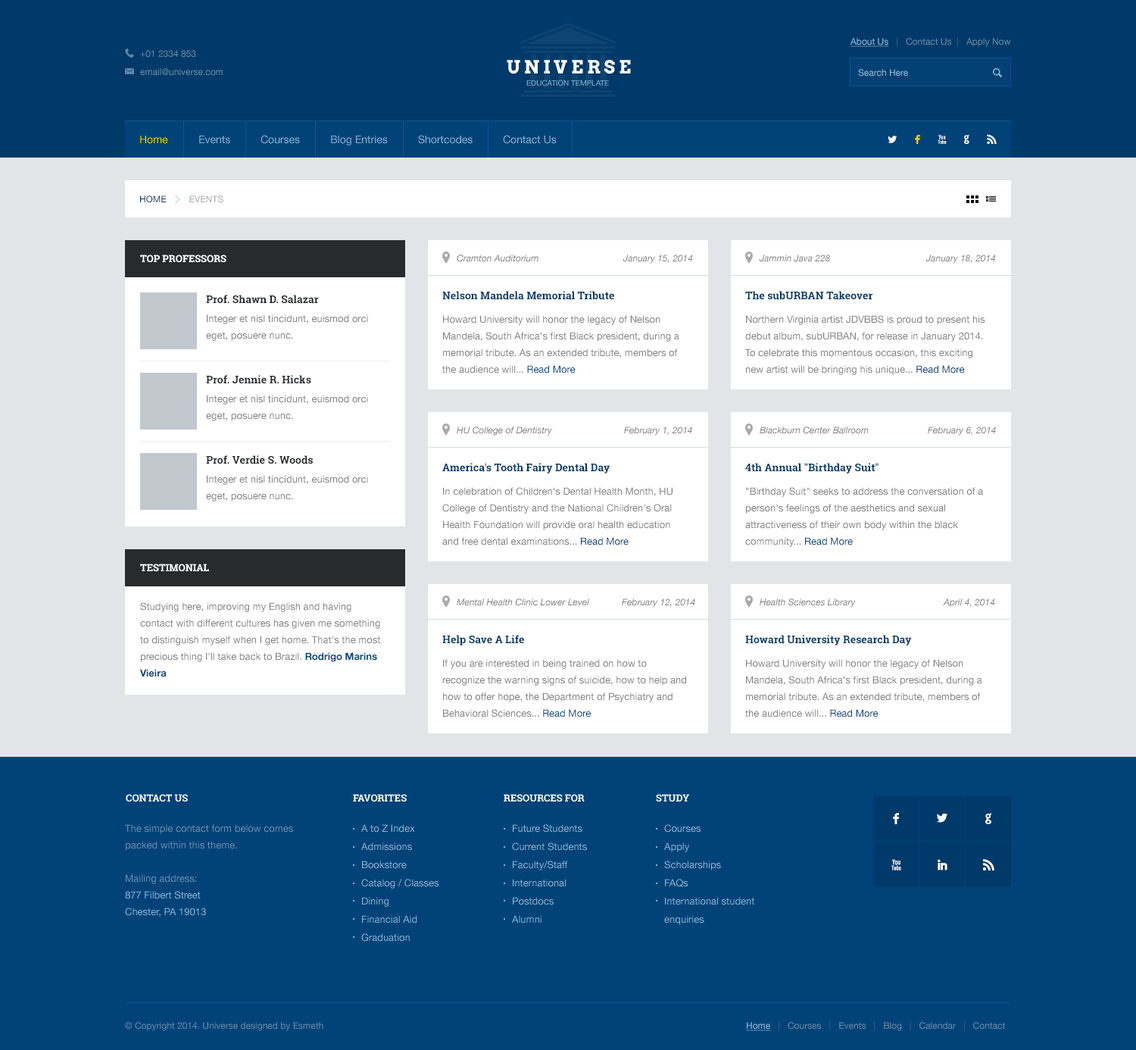
<style>
.page{position:relative;width:1136px;height:1050px;background:#014379}
.page>*{position:absolute;margin:0}
.t1{font:9.1px "HelveticaNeue";color:#6289a7}
.t2{font:9.1px "HelveticaNeue";color:#8ab5d6;text-decoration:underline}
.t3{font:9.1px "HelveticaNeue";color:#44647c}
.t4{font:18.2px "Arvo-Bold";letter-spacing:0.2em;color:#ffffff}
.t5{font:9.1px "HelveticaNeue";color:#8ab5d6}
.t6{font:7.6px "HelveticaNeue";color:#8ab5d6}
.t7{font:10.6px "HelveticaNeue";color:#fecd0b}
.t8{font:10.6px "HelveticaNeue";color:#8ab5d6}
.t9{font:15.1px "Socialico";letter-spacing:1.1em;color:#ffffff}
.t10{font:15.1px "Socialico";letter-spacing:1.1em;color:#fecd0b}
.t11{font:9.1px "HelveticaNeue";color:#aaaaaa}
.t12{font:9.1px "HelveticaNeue";color:#003a6a}
.t13{font:9.8px "RobotoSlab-Bold";color:#ffffff;text-transform:uppercase}
.t14{font:9.1px "HelveticaNeue-Italic";color:#808080}
.t15{font:10.6px "RobotoSlab-Bold";color:#003a6a}
.t16{font:10.6px "RobotoSlab-Bold";color:#282a2c}
.t17{font:9.8px/16.7px "HelveticaNeue";color:#808080}
.t18{font:9.8px/16.7px "HelveticaNeue";color:#014379}
.t19{font:9.8px/16.7px "HelveticaNeue-Bold";color:#014379}
.t20{font:18.2px "Socialico";color:#ffffff;text-transform:uppercase}
.t21{font:9.8px/16.7px "HelveticaNeue";color:#6b90ad}
.t22{font:9.8px/16.7px "HelveticaNeue";color:#8ab5d6}
.t23{font:9.8px/18.2px "HelveticaNeue";color:#8ab5d6}
</style>
<div class="page">
<p class="t1" style="left:850px;top:37px;width:161px;height:10px"><span class="t2">About Us  </span><span class="t3"> |   </span>Contact Us <span class="t3"> | </span>  Apply Now</p>
<p class="t1" style="left:140px;top:50px;width:56px;height:8px">+01 2334 853</p>
<p class="t4" style="left:507px;top:60px;width:124px;height:14px">UNIVERSE</p>
<p class="t1" style="left:140px;top:68px;width:83px;height:8px">email@universe.com</p>
<p class="t5" style="left:858px;top:69px;width:50px;height:7px">Search Here</p>
<p class="t6" style="left:526px;top:80px;width:83px;height:6px">EDUCATION TEMPLATE</p>
<p class="t7" style="left:140px;top:136px;width:28px;height:8px">Home</p>
<p class="t8" style="left:199px;top:136px;width:31px;height:8px">Events</p>
<p class="t8" style="left:261px;top:135px;width:39px;height:9px">Courses</p>
<p class="t8" style="left:331px;top:136px;width:57px;height:9px">Blog Entries</p>
<p class="t8" style="left:418px;top:135px;width:55px;height:9px">Shortcodes</p>
<p class="t8" style="left:503px;top:135px;width:54px;height:9px">Contact Us</p>
<p class="t9" style="left:888px;top:134px;width:109px;height:10px">L<span class="t10">F</span>XGR</p>
<p class="t11" style="left:140px;top:195px;width:83px;height:8px"><span class="t12">HOME         </span>EVENTS</p>
<p class="t13" style="left:140px;top:254px;width:86px;height:9px">top professors</p>
<p class="t14" style="left:457px;top:254px;width:81px;height:8px">Cramton Auditorium</p>
<p class="t14" style="left:623px;top:254px;width:70px;height:10px">January 15, 2014</p>
<p class="t14" style="left:759px;top:254px;width:71px;height:8px">Jammin Java 228</p>
<p class="t14" style="left:925px;top:254px;width:71px;height:10px">January 18, 2014</p>
<p class="t15" style="left:442px;top:291px;width:172px;height:9px">Nelson Mandela Memorial Tribute</p>
<p class="t15" style="left:745px;top:291px;width:128px;height:9px">The subURBAN Takeover</p>
<p class="t16" style="left:206px;top:295px;width:113px;height:9px">Prof. Shawn D. Salazar</p>
<p class="t17" style="left:206px;top:314px;width:162px;height:27px">Integer et nisl tincidunt, euismod orci eget, posuere nunc.</p>
<p class="t17" style="left:442px;top:315px;width:237px;height:58px">Howard University will honor the legacy of Nelson Mandela, South Africa's first Black president, during a memorial tribute. As an extended tribute, members of the audience will... <span class="t18">Read More</span></p>
<p class="t17" style="left:745px;top:315px;width:240px;height:60px">Northern Virginia artist JDVBBS is proud to present his debut album, subURBAN, for release in January 2014. To celebrate this momentous occasion, this exciting new artist will be bringing his unique... <span class="t18">Read More</span></p>
<p class="t16" style="left:206px;top:375px;width:105px;height:9px">Prof. Jennie R. Hicks</p>
<p class="t17" style="left:206px;top:395px;width:162px;height:26px">Integer et nisl tincidunt, euismod orci eget, posuere nunc.</p>
<p class="t14" style="left:457px;top:426px;width:95px;height:9px">HU College of Dentistry</p>
<p class="t14" style="left:624px;top:426px;width:68px;height:9px">February 1, 2014</p>
<p class="t14" style="left:760px;top:426px;width:109px;height:8px">Blackburn Center Ballroom</p>
<p class="t14" style="left:928px;top:426px;width:68px;height:9px">February 6, 2014</p>
<p class="t16" style="left:206px;top:455px;width:107px;height:9px">Prof. Verdie S. Woods</p>
<p class="t15" style="left:442px;top:463px;width:168px;height:10px">America's Tooth Fairy Dental Day</p>
<p class="t15" style="left:745px;top:463px;width:134px;height:10px">4th Annual "Birthday Suit"</p>
<p class="t17" style="left:206px;top:475px;width:162px;height:26px">Integer et nisl tincidunt, euismod orci eget, posuere nunc.</p>
<p class="t17" style="left:442px;top:487px;width:231px;height:58px">In celebration of Children's Dental Health Month, HU College of Dentistry and the National Children's Oral Health Foundation will provide oral health education and free dental examinations... <span class="t18">Read More</span></p>
<p class="t17" style="left:745px;top:487px;width:238px;height:60px">"Birthday Suit" seeks to address the conversation of a person's feelings of the aesthetics and sexual attractiveness of their own body within the black community... <span class="t18">Read More</span></p>
<p class="t13" style="left:140px;top:563px;width:69px;height:9px">Testimonial</p>
<p class="t17" style="left:140px;top:602px;width:240px;height:75px">Studying here, improving my English and having contact with different cultures has given me something to distinguish myself when I get home. That's the most precious thing I'll take back to Brazil. <span class="t19">Rodrigo Marins Vieira</span></p>
<p class="t14" style="left:457px;top:598px;width:132px;height:8px">Mental Health Clinic Lower Level</p>
<p class="t14" style="left:622px;top:598px;width:73px;height:9px">February 12, 2014</p>
<p class="t14" style="left:760px;top:598px;width:96px;height:9px">Health Sciences Library</p>
<p class="t14" style="left:943px;top:598px;width:52px;height:9px">April 4, 2014</p>
<p class="t15" style="left:442px;top:635px;width:82px;height:10px">Help Save A Life</p>
<p class="t15" style="left:745px;top:635px;width:167px;height:10px">Howard University Research Day</p>
<p class="t17" style="left:442px;top:659px;width:244px;height:58px">If you are interested in being trained on how to recognize the warning signs of suicide, how to help and how to offer hope, the Department of Psychiatry and Behavioral Sciences... <span class="t18">Read More</span></p>
<p class="t17" style="left:745px;top:659px;width:237px;height:58px">Howard University will honor the legacy of Nelson Mandela, South Africa's first Black president, during a memorial tribute. As an extended tribute, members of the audience will... <span class="t18">Read More</span></p>
<p class="t13" style="left:126px;top:794px;width:62px;height:8px">Contact us</p>
<p class="t13" style="left:353px;top:794px;width:54px;height:8px">favorites</p>
<p class="t13" style="left:504px;top:794px;width:81px;height:8px">resources for</p>
<p class="t13" style="left:656px;top:794px;width:33px;height:8px">STUDY</p>
<p class="t20" style="left:893px;top:813px;width:6px;height:11px">F</p>
<p class="t20" style="left:937px;top:813px;width:10px;height:9px">L</p>
<p class="t20" style="left:985px;top:813px;width:6px;height:11px">G</p>
<p class="t21" style="left:125px;top:824px;width:168px;height:92px">The simple contact form below comes packed within this theme. <br><br>Mailing address:<br><span class="t22">877 Filbert Street<br>Chester, PA 19013</span></p>
<p class="t23" style="left:361px;top:824px;width:78px;height:117px">A to Z Index<br>Admissions<br>Bookstore<br>Catalog / Classes<br>Dining<br>Financial Aid<br>Graduation</p>
<p class="t23" style="left:512px;top:824px;width:75px;height:99px">Future Students<br>Current Students<br>Faculty/Staff<br>International<br>Postdocs<br>Alumni</p>
<p class="t23" style="left:664px;top:824px;width:90px;height:101px">Courses<br>Apply<br>Scholarships<br>FAQs<br>International student enquiries</p>
<p class="t20" style="left:891px;top:859px;width:10px;height:11px">X</p>
<p class="t20" style="left:938px;top:859px;width:9px;height:11px">I</p>
<p class="t20" style="left:983px;top:859px;width:11px;height:11px">R</p>
<p class="t1" style="left:125px;top:1022px;width:198px;height:9px">© Copyright 2014. Universe designed by Esmeth</p>
<p class="t1" style="left:746px;top:1021px;width:259px;height:10px"><span class="t2">Home  </span><span class="t3"> |   </span>Courses  <span class="t3"> | </span>  Events  <span class="t3"> | </span>  Blog  <span class="t3"> | </span>  Calendar  <span class="t3"> | </span>  Contact</p>
</div>
